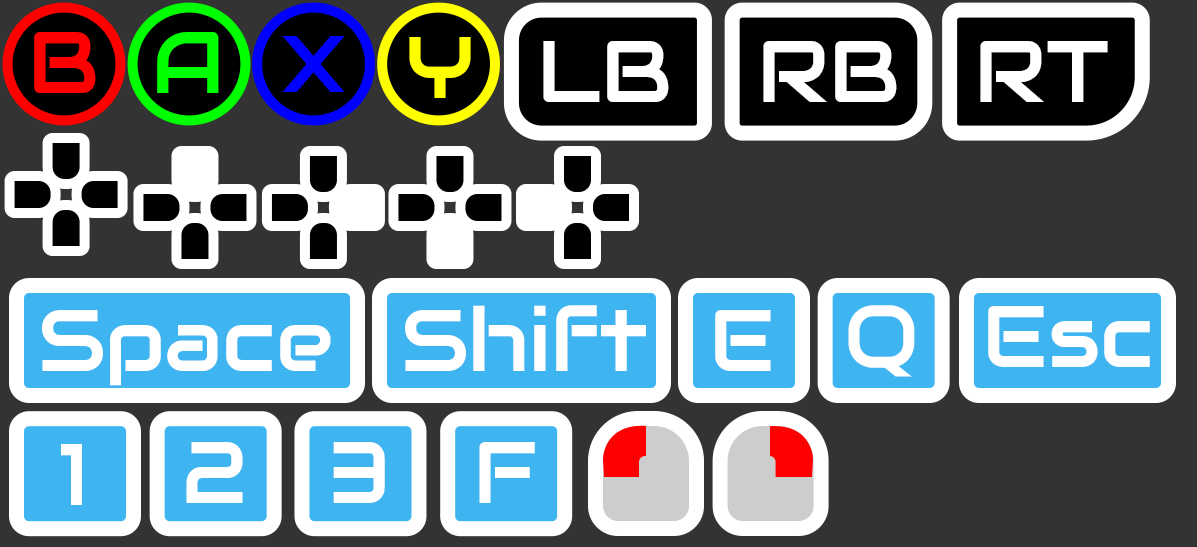
<style>
.page{position:relative;width:1197px;height:547px;background:#333333}
.page>*{position:absolute;margin:0}
.t1{font:87px "Audiowide-Regular";color:#ff0000}
.t2{font:87px "Audiowide-Regular";color:#00ff00}
.t3{font:80px "Audiowide-Regular";color:#0000ff}
.t4{font:87px "Audiowide-Regular";color:#ffff00}
.t5{font:87px "Audiowide-Regular";color:#ffffff}
</style>
<div class="page">
<p class="t1" style="left:34px;top:32px;width:62px;height:61px">B</p>
<p class="t2" style="left:157px;top:32px;width:62px;height:61px">A</p>
<p class="t3" style="left:282px;top:36px;width:63px;height:56px">X</p>
<p class="t4" style="left:409px;top:37px;width:62px;height:61px">Y</p>
<p class="t5" style="left:543px;top:41px;width:126px;height:61px">LB</p>
<p class="t5" style="left:763px;top:41px;width:134px;height:61px">RB</p>
<p class="t5" style="left:980px;top:41px;width:128px;height:61px">RT</p>
<p class="t5" style="left:405px;top:305px;width:241px;height:66px">Shift</p>
<p class="t5" style="left:848px;top:305px;width:67px;height:72px">Q</p>
<p class="t5" style="left:42px;top:310px;width:289px;height:76px">Space</p>
<p class="t5" style="left:715px;top:310px;width:56px;height:61px">E</p>
<p class="t5" style="left:988px;top:306px;width:162px;height:61px">Esc</p>
<p class="t5" style="left:61px;top:444px;width:21px;height:61px">1</p>
<p class="t5" style="left:186px;top:442px;width:57px;height:61px">2</p>
<p class="t5" style="left:333px;top:442px;width:52px;height:61px">3</p>
<p class="t5" style="left:479px;top:442px;width:56px;height:61px">F</p>
</div>
